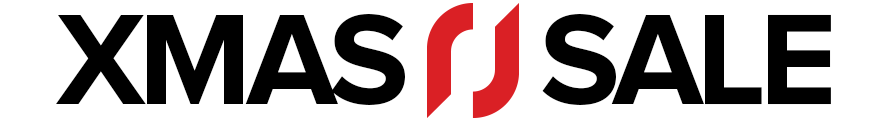
<style>
.page{position:relative;width:886px;height:122px;background:#ffffff}
.page>*{position:absolute;margin:0}
.t1{font:133.3px "ProximaNova-Bold";letter-spacing:-0.05em;color:#000000;text-transform:uppercase}
</style>
<div class="page">
<p class="t1" style="left:56px;top:14px;width:775px;height:91px">xmas     sale</p>
</div>
